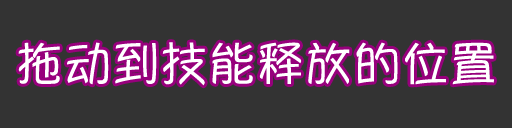
<style>
.page{position:relative;width:512px;height:128px;background:#333333}
.page>*{position:absolute;margin:0}
.t1{font:48px "YuppySC-Regular";letter-spacing:0.005em;color:#ffffff}
</style>
<div class="page">
<p class="t1" style="left:18px;top:42px;width:476px;height:44px">拖动到技能释放的位置</p>
</div>
